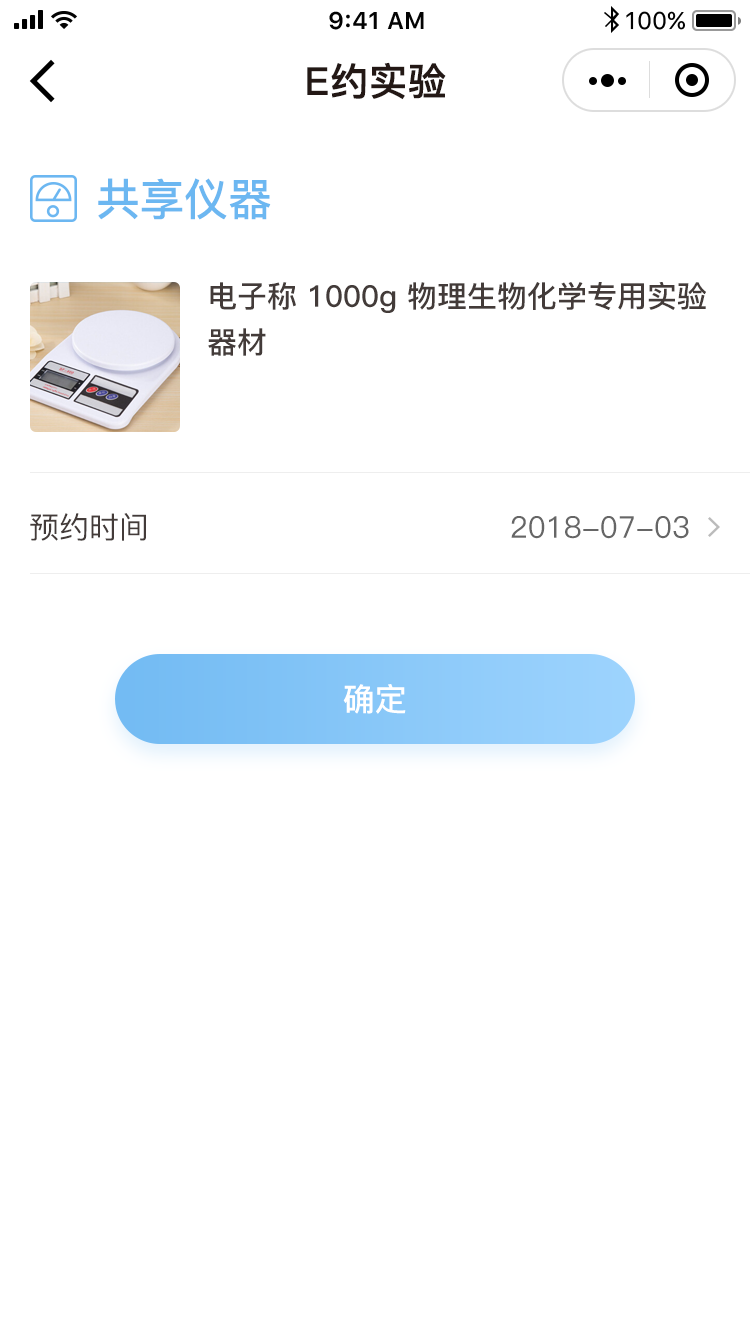
<style>
.page{position:relative;width:750px;height:1334px;background:#ffffff}
.page>*{position:absolute;margin:0}
.t1{font:38px "PingFang-SC-Bold";color:#231815;font-weight:bold}
.t2{font:44px "PingFang-SC-Bold";color:#6cb7f1}
.t3{font:30px/46px "PingFang-SC-Bold";color:#433b39}
.t4{font:30px "PingFang-SC-Medium";color:#433b39}
.t5{font:30px "PingFang-SC-Medium";color:#666666}
.t6{font:32px "PingFang-SC-Bold";color:#ffffff}
</style>
<div class="page">
<p class="t1" style="left:307px;top:62px;width:139px;height:38px">E约实验</p>
<p class="t2" style="left:98px;top:178px;width:173px;height:42px">共享仪器</p>
<p class="t3" style="left:208px;top:282px;width:498px;height:74px">电子称 1000g 物理生物化学专用实验<br>器材</p>
<p class="t4" style="left:30px;top:513px;width:116px;height:28px">预约时间</p>
<p class="t5" style="left:511px;top:516px;width:178px;height:23px">2018-07-03</p>
<p class="t6" style="left:343px;top:684px;width:63px;height:30px">确定</p>
</div>
